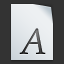
<style>
.page{position:relative;width:64px;height:64px;background:#333333}
.page>*{position:absolute;margin:0}
.t1{font:36px "BookAntiqua-Italic"}
</style>
<div class="page">
<p class="t1" style="left:19px;top:28px;width:27px;height:26px">A</p>
</div>
